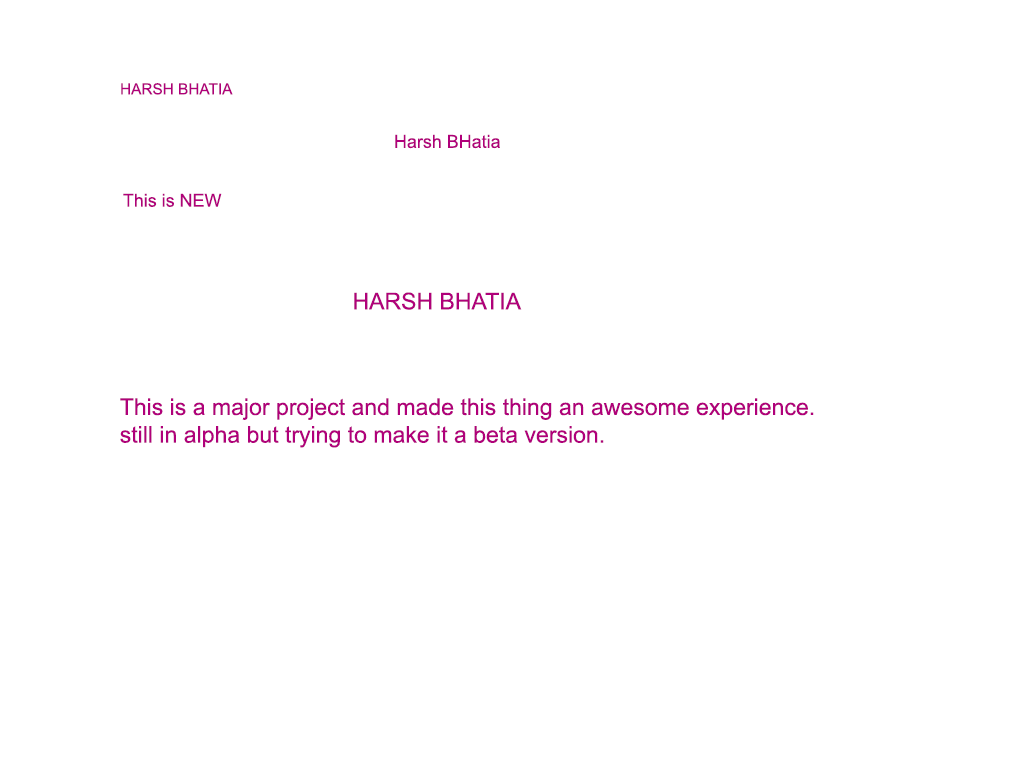
<style>
.page{position:relative;width:1024px;height:768px;background:#ffffff}
.page>*{position:absolute;margin:0}
.t1{font:15.4px "ArialMT";color:#b0007a}
.t2{font:17.9px "ArialMT";color:#b0007a}
.t3{font:23px "ArialMT";color:#b0007a}
</style>
<div class="page">
<p class="t1" style="left:121px;top:83px;width:112px;height:12px">HARSH BHATIA</p>
<p class="t2" style="left:395px;top:134px;width:105px;height:15px">Harsh BHatia</p>
<p class="t2" style="left:123px;top:193px;width:99px;height:14px">This is NEW</p>
<p class="t3" style="left:354px;top:292px;width:168px;height:18px">HARSH BHATIA</p>
<p class="t3" style="left:120px;top:398px;width:694px;height:50px">This is a major project and made this thing an awesome experience.<br>still in alpha but trying to make it a beta version.</p>
</div>
